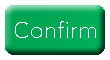
<style>
.page{position:relative;width:110px;height:60px;background:#ffffff}
.page>*{position:absolute;margin:0}
.t1{font:23px "AvenirNext-Regular";color:#ffffff}
</style>
<div class="page">
<p class="t1" style="left:15px;top:21px;width:81px;height:17px">Confirm</p>
</div>
